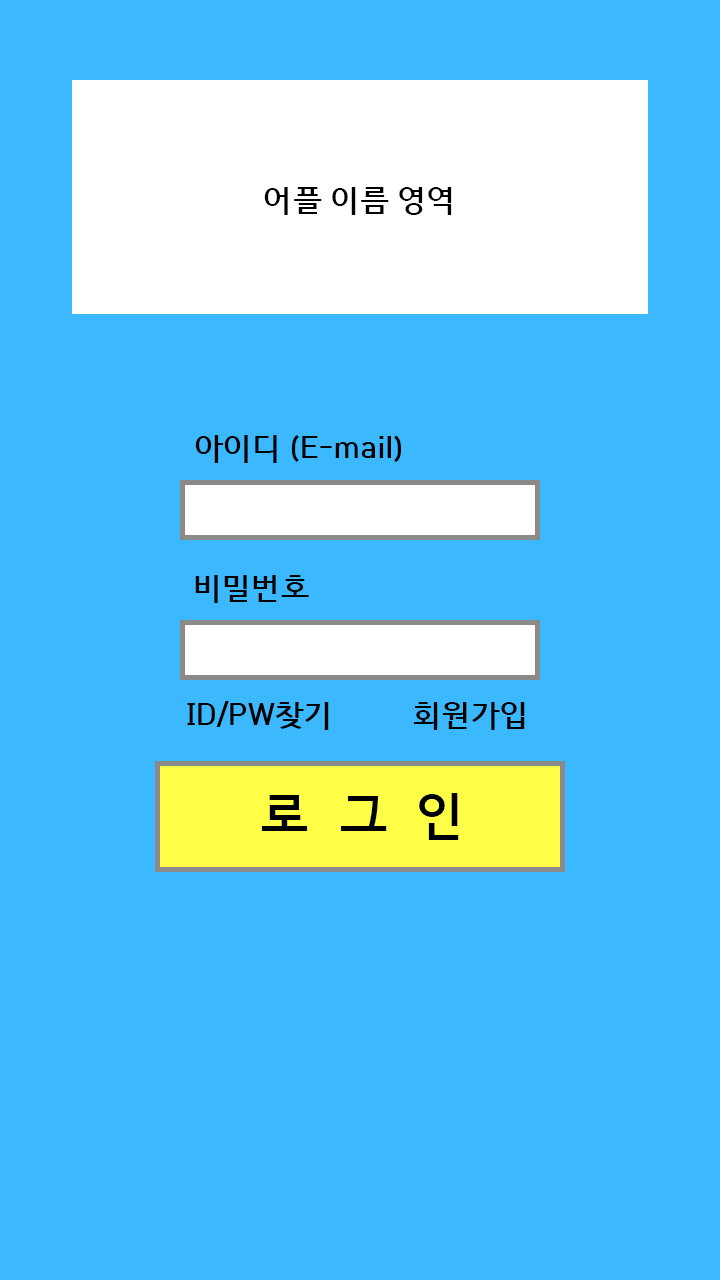
<style>
.page{position:relative;width:720px;height:1280px;background:#3cb8ff}
.page>*{position:absolute;margin:0}
.t1{font:30px "HCRDotum-Bold";color:#000000}
.t2{font:50px "HCRDotum-Bold";color:#000000}
</style>
<div class="page">
<p class="t1" style="left:264px;top:187px;width:188px;height:28px">어플 이름 영역</p>
<p class="t1" style="left:195px;top:435px;width:206px;height:28px">아이디 (E-mail)</p>
<p class="t1" style="left:195px;top:575px;width:114px;height:28px">비밀번호</p>
<p class="t1" style="left:187px;top:701px;width:142px;height:29px">ID/PW찾기</p>
<p class="t1" style="left:413px;top:702px;width:112px;height:28px">회원가입</p>
<p class="t2" style="left:261px;top:793px;width:198px;height:47px">로  그  인</p>
</div>
